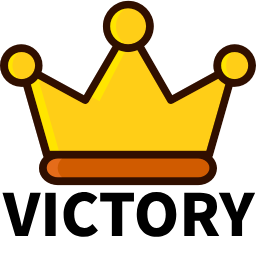
<style>
.page{position:relative;width:256px;height:256px;background:#ffffff}
.page>*{position:absolute;margin:0}
.t1{font:58px "NotoSansKR-Black";color:#000000}
</style>
<div class="page">
<p class="t1" style="left:2px;top:192px;width:254px;height:45px">VICTORY</p>
</div>
